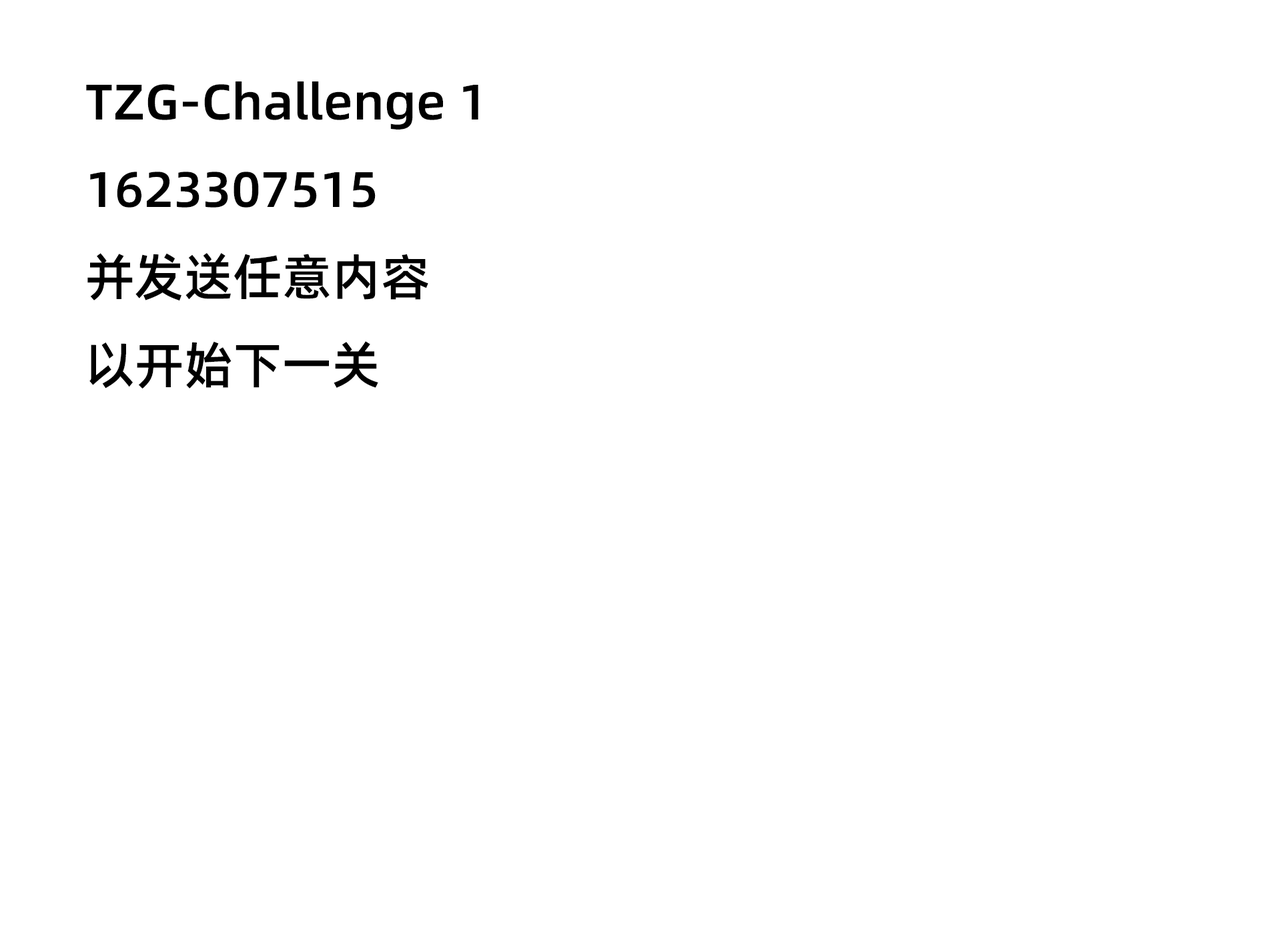
<style>
.page{position:relative;width:1261px;height:946px;background:#ffffff}
.page>*{position:absolute;margin:0}
.t1{font:50px "AlibabaPuHuiTi-Medium";color:#000000}
</style>
<div class="page">
<p class="t1" style="left:86px;top:81px;width:392px;height:307px">TZG-Challenge 1<br>1623307515<br>并发送任意内容<br>以开始下一关</p>
</div>
